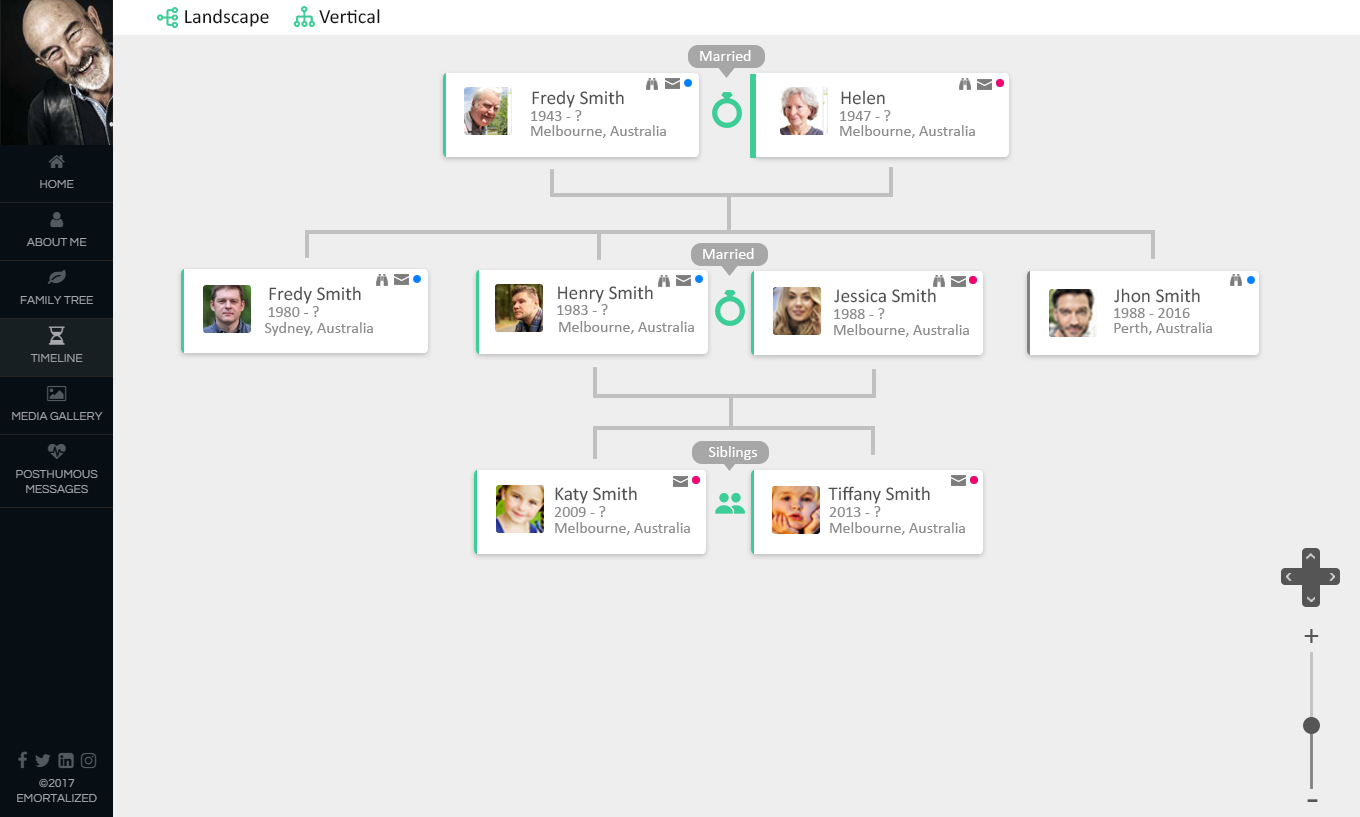
<style>
.page{position:relative;width:1360px;height:817px;background:#eeeeee}
.page>*{position:absolute;margin:0}
.t1{font:20.3px "Calibri";color:#161616}
.t2{font:16px "Calibri";color:#ffffff}
.t3{font:19.5px "Calibri";color:#505050}
.t4{font:16px "Calibri";color:#8c8c8c}
.t5{font:12px "Calibri";color:#8c8c8c}
.t6{font:32px "Calibri";color:#555555}
.t7{font:41.7px "Calibri";color:#555555}
</style>
<div class="page">
<p class="t1" style="left:185px;top:9px;width:84px;height:18px">Landscape</p>
<p class="t1" style="left:319px;top:9px;width:61px;height:15px">Vertical</p>
<p class="t2" style="left:700px;top:50px;width:51px;height:11px">Married</p>
<p class="t3" style="left:532px;top:90px;width:92px;height:18px">Fredy Smith</p>
<p class="t3" style="left:841px;top:90px;width:44px;height:15px">Helen</p>
<p class="t4" style="left:531px;top:110px;width:51px;height:11px">1943 - ?</p>
<p class="t4" style="left:840px;top:110px;width:51px;height:11px">1947 - ?</p>
<p class="t4" style="left:531px;top:125px;width:135px;height:13px">Melbourne, Australia</p>
<p class="t4" style="left:840px;top:125px;width:135px;height:13px">Melbourne, Australia</p>
<p class="t2" style="left:703px;top:248px;width:51px;height:11px">Married</p>
<p class="t3" style="left:269px;top:286px;width:92px;height:18px">Fredy Smith</p>
<p class="t3" style="left:558px;top:285px;width:95px;height:18px">Henry Smith</p>
<p class="t3" style="left:834px;top:288px;width:102px;height:15px">Jessica Smith</p>
<p class="t3" style="left:1114px;top:288px;width:86px;height:15px">Jhon Smith</p>
<p class="t4" style="left:557px;top:304px;width:51px;height:11px">1983 - ?</p>
<p class="t4" style="left:268px;top:306px;width:51px;height:11px">1980 - ?</p>
<p class="t4" style="left:834px;top:308px;width:51px;height:11px">1988 - ?</p>
<p class="t4" style="left:1114px;top:308px;width:76px;height:10px">1988 - 2016</p>
<p class="t4" style="left:264px;top:322px;width:109px;height:14px">Sydney, Australia</p>
<p class="t4" style="left:559px;top:321px;width:135px;height:13px">Melbourne, Australia</p>
<p class="t4" style="left:834px;top:324px;width:135px;height:13px">Melbourne, Australia</p>
<p class="t5" style="left:1114px;top:322px;width:98px;height:13px">Perth, Australia</p>
<p class="t2" style="left:708px;top:446px;width:49px;height:14px">Siblings</p>
<p class="t3" style="left:555px;top:486px;width:82px;height:18px">Katy Smith</p>
<p class="t3" style="left:828px;top:486px;width:102px;height:18px">Tiffany Smith</p>
<p class="t4" style="left:554px;top:506px;width:52px;height:11px">2009 - ?</p>
<p class="t4" style="left:829px;top:506px;width:52px;height:11px">2013 - ?</p>
<p class="t4" style="left:555px;top:522px;width:135px;height:13px">Melbourne, Australia</p>
<p class="t4" style="left:830px;top:522px;width:135px;height:13px">Melbourne, Australia</p>
<p class="t6" style="left:1304px;top:629px;width:15px;height:14px">+</p>
<p class="t7" style="left:1307px;top:799px;width:11px;height:3px">-</p>
</div>
